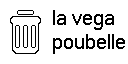
<style>
.page{position:relative;width:128px;height:64px;background:#ffffff}
.page>*{position:absolute;margin:0}
.t1{font:20px "MicrosoftSansSerif";color:#000000}
</style>
<div class="page">
<p class="t1" style="left:53px;top:10px;width:72px;height:44px">la vega<br>poubelle</p>
</div>
